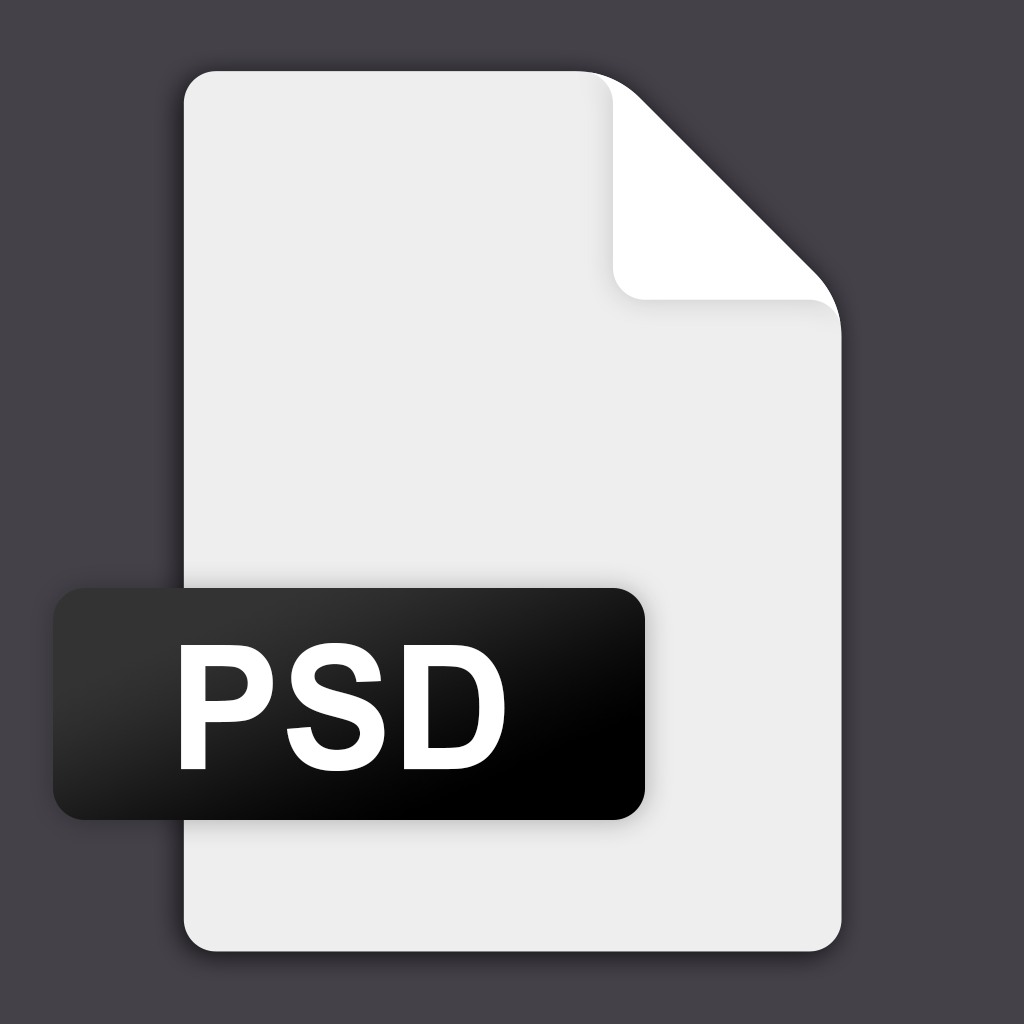
<style>
.page{position:relative;width:1024px;height:1024px;background:#444149}
.page>*{position:absolute;margin:0}
.t1{font:172.6px "Arial-BoldMT";color:#ffffff}
</style>
<div class="page">
<p class="t1" style="left:181px;top:643px;width:324px;height:128px">PSD</p>
</div>
